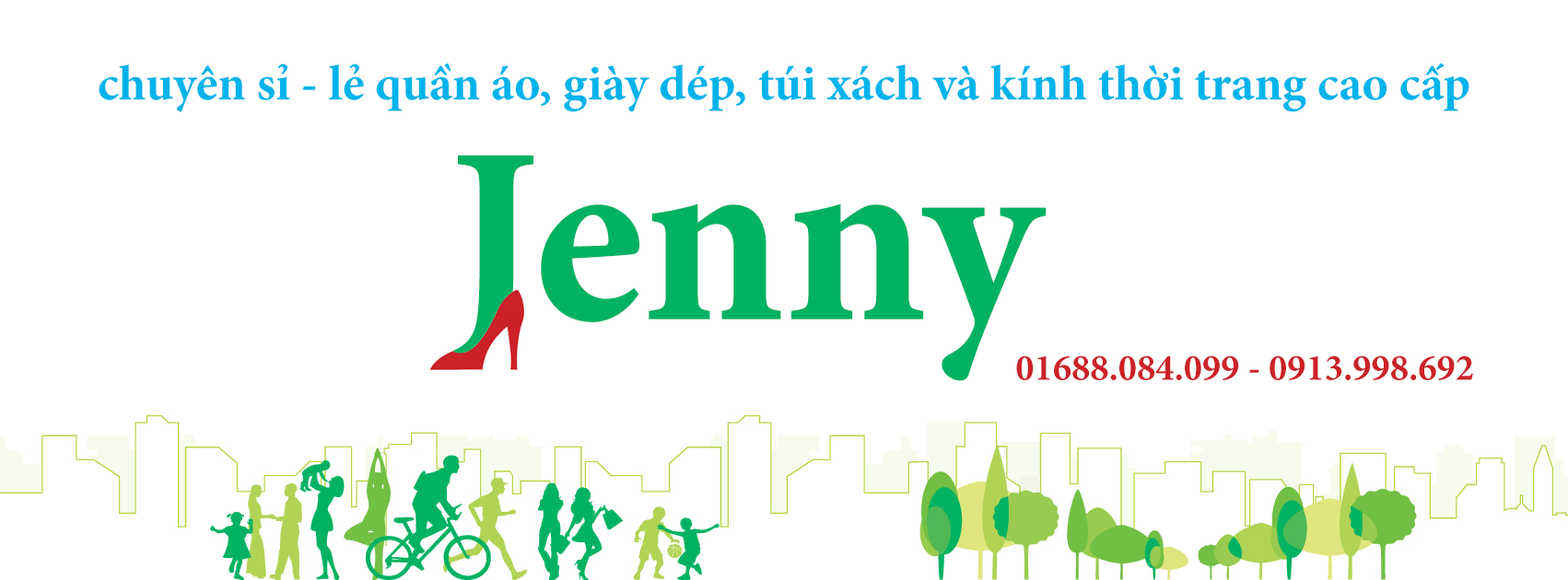
<style>
.page{position:relative;width:1568px;height:580px;background:#ffffff}
.page>*{position:absolute;margin:0}
.t1{font:49.7px "MinionPro-Bold";color:#00b4eb}
.t2{font:252.1px "MinionPro-Bold";color:#01b262}
.t3{font:37.3px "MinionPro-Bold";color:#cb2228}
</style>
<div class="page">
<p class="t1" style="left:99px;top:63px;width:1370px;height:49px">chuyên sỉ - lẻ quần áo, giày dép, túi xách và kính thời trang cao cấp</p>
<p class="t2" style="left:452px;top:155px;width:595px;height:226px">Jenny</p>
<p class="t3" style="left:1016px;top:356px;width:457px;height:24px">01688.084.099 - 0913.998.692</p>
</div>
